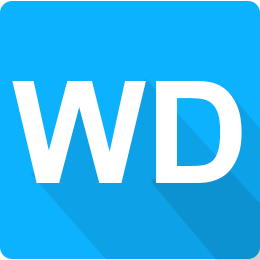
<style>
.page{position:relative;width:260px;height:260px;background:#0db2ff}
.page>*{position:absolute;margin:0}
.t1{font:141.7px "Arial-BoldMT";color:#ffffff}
</style>
<div class="page">
<p class="t1" style="left:12px;top:81px;width:230px;height:102px">WD</p>
</div>
